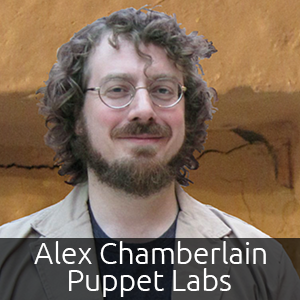
<style>
.page{position:relative;width:300px;height:300px}
.page>*{position:absolute;margin:0}
.t1{font:30px "Ubuntu-Light";color:#ffffff}
.t2{font:12px "Ubuntu-Light";color:#ffffff}
</style>
<div class="page">
<p class="t1" style="left:34px;top:241px;width:232px;height:23px">Alex Chamberlain</p>
<p class="t2" style="left:69px;top:268px;width:162px;height:29px;text-align:center">Puppet Labs</p>
</div>
